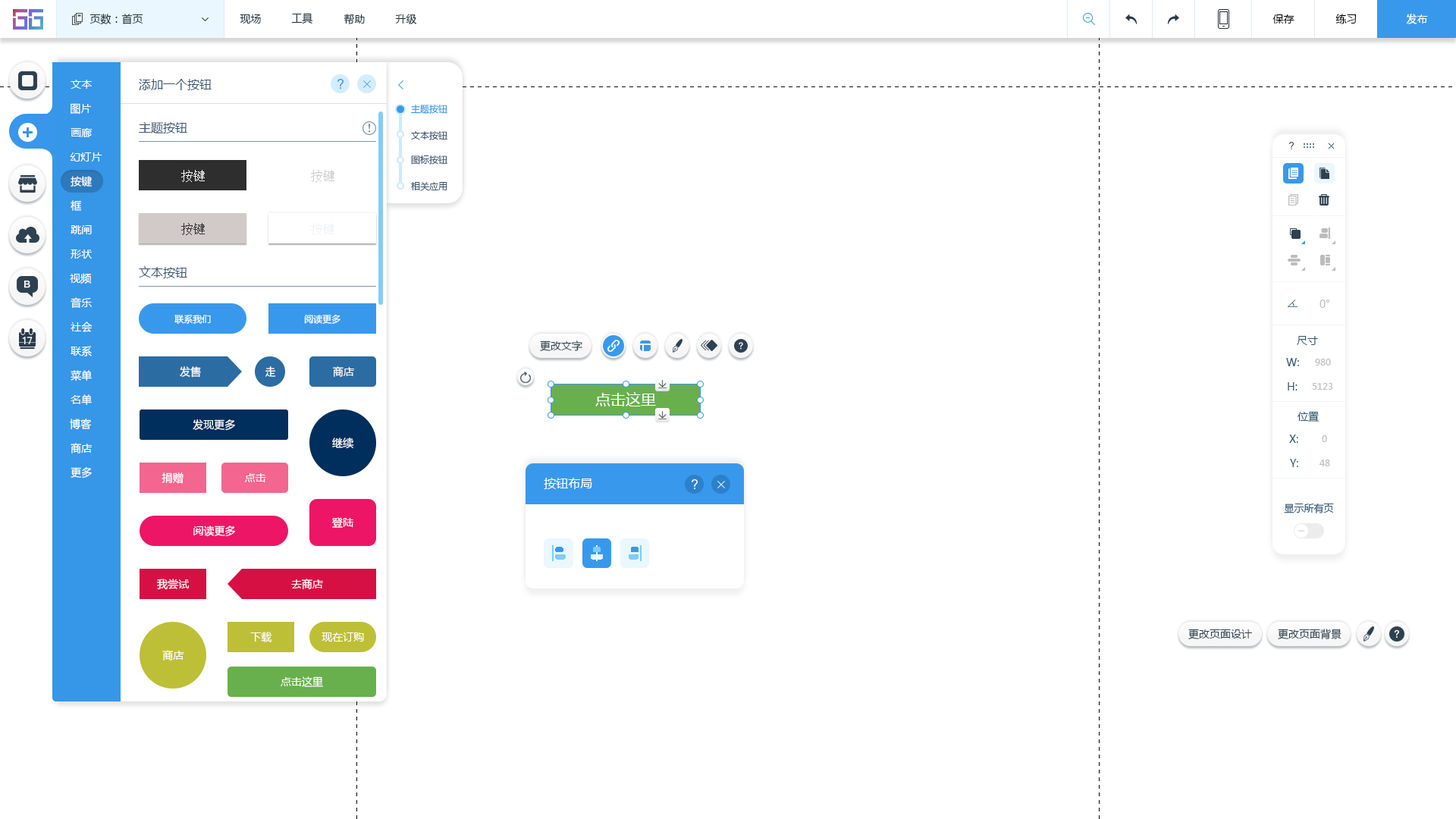
<style>
.page{position:relative;width:1456px;height:819px;background:#ffffff}
.page>*{position:absolute;margin:0}
.t1{font:10.6px "MicrosoftYaHei";color:#20303c}
.t2{font:10.6px "MicrosoftYaHei";color:#000000}
.t3{font:10.6px "MicrosoftYaHei";color:#ffffff}
.t4{font:12.1px "MicrosoftYaHei";color:#395671}
.t5{font:9.1px "MicrosoftYaHei";color:#3696e8}
.t6{font:9.1px "MicrosoftYaHei";color:#395671}
.t7{font:12.1px "SimSun";color:#ffffff}
.t8{font:12.1px "SimSun";color:#cacaca}
.t9{font:12.1px "SimSun";color:#2f2e2e}
.t10{font:12.1px "SimSun";color:#edf1f5}
.t11{font:10.6px "MicrosoftYaHei";color:#bcbcbc}
.t12{font:9.1px "MicrosoftYaHei";color:#ffffff}
.t13{font:10.6px "MicrosoftYaHei";color:#2d4150}
.t14{font:10.6px "MicrosoftYaHei";color:#2b5672}
.t15{font:9.1px "MicrosoftYaHei";color:#bcbcbc}
.t16{font:15.2px "MicrosoftYaHei";color:#ffffff}
.t17{font:12.1px "MicrosoftYaHei";color:#ffffff}
.t18{font:9.9px "MicrosoftYaHei";color:#2b5672}
</style>
<div class="page">
<p class="t1" style="left:89px;top:14px;width:54px;height:11px">页数：首页</p>
<p class="t1" style="left:240px;top:14px;width:21px;height:10px">现场</p>
<p class="t1" style="left:291px;top:13px;width:22px;height:11px">工具</p>
<p class="t1" style="left:344px;top:14px;width:21px;height:11px">帮助</p>
<p class="t1" style="left:395px;top:14px;width:22px;height:10px">升级</p>
<p class="t2" style="left:1272px;top:14px;width:22px;height:10px">保存</p>
<p class="t2" style="left:1335px;top:14px;width:22px;height:10px">练习</p>
<p class="t3" style="left:1406px;top:14px;width:22px;height:10px">发布</p>
<p class="t3" style="left:71px;top:80px;width:21px;height:9px">文本</p>
<p class="t4" style="left:139px;top:79px;width:73px;height:11px">添加一个按钮</p>
<p class="t3" style="left:71px;top:103px;width:21px;height:12px">图片</p>
<p class="t5" style="left:411px;top:105px;width:36px;height:9px">主题按钮</p>
<p class="t4" style="left:139px;top:122px;width:48px;height:11px">主题按钮</p>
<p class="t3" style="left:71px;top:128px;width:22px;height:9px">画廊</p>
<p class="t6" style="left:411px;top:131px;width:36px;height:9px">文本按钮</p>
<p class="t3" style="left:70px;top:152px;width:32px;height:10px">幻灯片</p>
<p class="t6" style="left:411px;top:155px;width:36px;height:10px">图标按钮</p>
<p class="t7" style="left:181px;top:170px;width:24px;height:12px">按键</p>
<p class="t8" style="left:311px;top:170px;width:23px;height:12px">按键</p>
<p class="t3" style="left:71px;top:176px;width:21px;height:11px">按键</p>
<p class="t6" style="left:411px;top:182px;width:36px;height:9px">相关应用</p>
<p class="t3" style="left:71px;top:200px;width:11px;height:11px">框</p>
<p class="t3" style="left:71px;top:225px;width:21px;height:9px">跳闸</p>
<p class="t9" style="left:181px;top:223px;width:24px;height:12px">按键</p>
<p class="t10" style="left:311px;top:223px;width:23px;height:12px">按键</p>
<p class="t3" style="left:71px;top:249px;width:22px;height:10px">形状</p>
<p class="t4" style="left:139px;top:266px;width:48px;height:12px">文本按钮</p>
<p class="t3" style="left:70px;top:273px;width:22px;height:11px">视频</p>
<p class="t3" style="left:71px;top:297px;width:21px;height:11px">音乐</p>
<p class="t11" style="left:1319px;top:300px;width:11px;height:8px">0°</p>
<p class="t12" style="left:174px;top:315px;width:37px;height:9px">联系我们</p>
<p class="t12" style="left:304px;top:314px;width:36px;height:10px">阅读更多</p>
<p class="t3" style="left:71px;top:322px;width:22px;height:10px">社会</p>
<p class="t13" style="left:540px;top:340px;width:42px;height:11px">更改文字</p>
<p class="t14" style="left:1297px;top:336px;width:21px;height:9px">尺寸</p>
<p class="t3" style="left:71px;top:346px;width:21px;height:10px">联系</p>
<p class="t14" style="left:1286px;top:358px;width:13px;height:8px">W:</p>
<p class="t15" style="left:1315px;top:359px;width:16px;height:7px">980</p>
<p class="t3" style="left:71px;top:370px;width:21px;height:11px">菜单</p>
<p class="t3" style="left:180px;top:366px;width:21px;height:12px">发售</p>
<p class="t3" style="left:265px;top:366px;width:11px;height:11px">走</p>
<p class="t3" style="left:333px;top:366px;width:21px;height:11px">商店</p>
<p class="t14" style="left:1288px;top:382px;width:9px;height:9px">H:</p>
<p class="t15" style="left:1312px;top:383px;width:21px;height:7px">5123</p>
<p class="t3" style="left:71px;top:394px;width:21px;height:11px">名单</p>
<p class="t16" style="left:595px;top:392px;width:61px;height:14px">点击这里</p>
<p class="t14" style="left:1297px;top:411px;width:22px;height:11px">位置</p>
<p class="t3" style="left:70px;top:419px;width:22px;height:11px">博客</p>
<p class="t3" style="left:193px;top:419px;width:42px;height:12px">发现更多</p>
<p class="t3" style="left:332px;top:438px;width:22px;height:11px">继续</p>
<p class="t14" style="left:1289px;top:435px;width:9px;height:8px">X:</p>
<p class="t15" style="left:1322px;top:435px;width:5px;height:7px">0</p>
<p class="t3" style="left:71px;top:443px;width:22px;height:10px">商店</p>
<p class="t14" style="left:1290px;top:459px;width:8px;height:8px">Y:</p>
<p class="t15" style="left:1319px;top:460px;width:11px;height:6px">48</p>
<p class="t3" style="left:71px;top:467px;width:21px;height:12px">更多</p>
<p class="t3" style="left:162px;top:472px;width:22px;height:12px">捐赠</p>
<p class="t3" style="left:245px;top:473px;width:21px;height:9px">点击</p>
<p class="t17" style="left:544px;top:478px;width:48px;height:11px">按钮布局</p>
<p class="t18" style="left:1284px;top:503px;width:50px;height:10px">显示所有页</p>
<p class="t3" style="left:332px;top:517px;width:21px;height:11px">登陆</p>
<p class="t3" style="left:193px;top:526px;width:42px;height:11px">阅读更多</p>
<p class="t3" style="left:157px;top:579px;width:32px;height:11px">我尝试</p>
<p class="t3" style="left:291px;top:579px;width:32px;height:10px">去商店</p>
<p class="t13" style="left:1188px;top:629px;width:64px;height:10px">更改页面设计</p>
<p class="t13" style="left:1278px;top:629px;width:63px;height:10px">更改页面背景</p>
<p class="t3" style="left:250px;top:632px;width:22px;height:10px">下载</p>
<p class="t3" style="left:322px;top:632px;width:42px;height:10px">现在订购</p>
<p class="t3" style="left:162px;top:650px;width:22px;height:10px">商店</p>
<p class="t3" style="left:281px;top:676px;width:42px;height:11px">点击这里</p>
</div>
